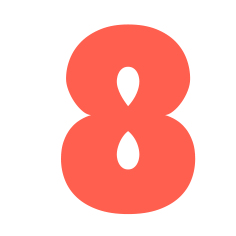
<style>
.page{position:relative;width:236px;height:236px;background:#ffffff}
.page>*{position:absolute;margin:0}
.t1{font:250px "SpicyRice-Regular";color:#ff5f4e}
</style>
<div class="page">
<p class="t1" style="left:61px;top:24px;width:135px;height:191px">8</p>
</div>
